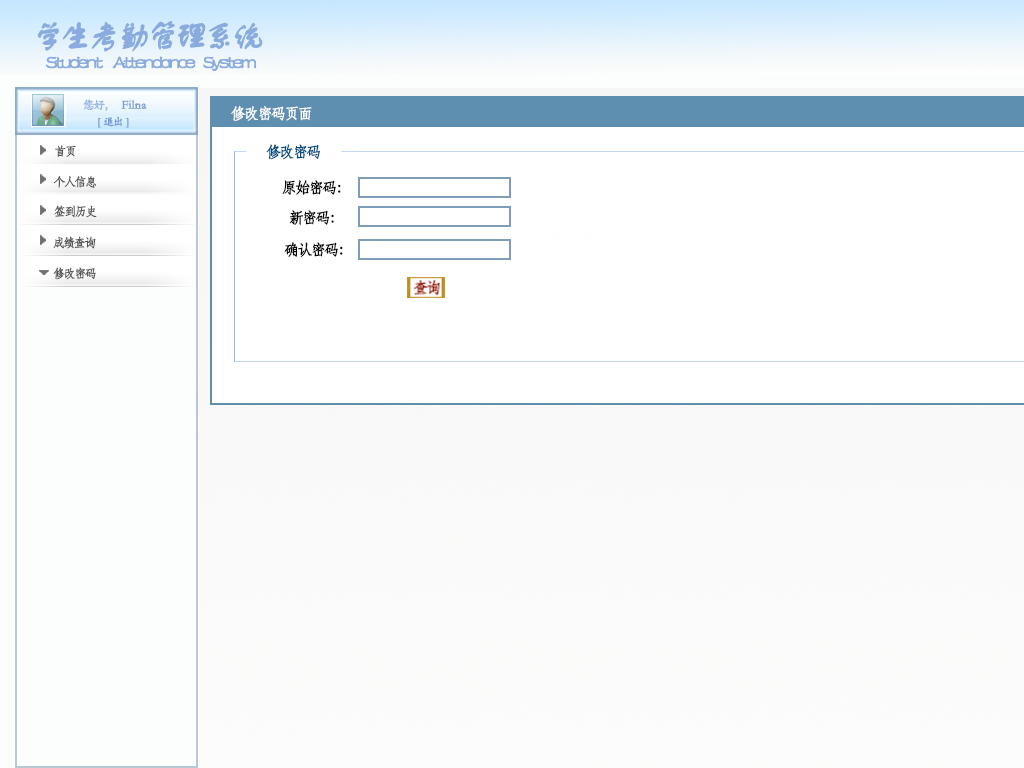
<style>
.page{position:relative;width:1024px;height:768px;background:#ffffff}
.page>*{position:absolute;margin:0}
.t1{font:32.7px "FZSTK--GBK1-0";letter-spacing:-0.15em;color:#89abde;font-weight:bold}
.t2{font:19.6px "FZSTK--GBK1-0";letter-spacing:-0.15em;color:#89abde;font-weight:bold}
.t3{font:12px "STKaiti";letter-spacing:-0.15em;color:#99b7e5;font-weight:bold}
.t4{font:12px "STKaiti";color:#789cd3;font-weight:bold}
.t5{font:15.3px "STFangsong";letter-spacing:-0.15em;color:#fdfefe;font-weight:bold}
.t6{font:10.9px "STKaiti";letter-spacing:-0.15em;color:#789cd3;font-weight:bold}
.t7{font:12px "STFangsong";letter-spacing:-0.15em;color:#555555;font-weight:bold}
.t8{font:15.3px "STFangsong";letter-spacing:-0.15em;color:#014e82;font-weight:bold}
.t9{font:15.3px "STFangsong";letter-spacing:-0.15em;color:#030303;font-weight:bold}
</style>
<div class="page">
<p class="t1" style="left:37px;top:21px;width:226px;height:31px">学生考勤管理系统</p>
<p class="t2" style="left:46px;top:56px;width:211px;height:16px">Student     Attendance    System</p>
<p class="t3" style="left:83px;top:99px;width:25px;height:12px">您好，</p>
<p class="t4" style="left:121px;top:100px;width:26px;height:9px">Filna</p>
<p class="t5" style="left:231px;top:105px;width:81px;height:16px">修改密码页面</p>
<p class="t6" style="left:98px;top:116px;width:31px;height:12px">[   退出   ]</p>
<p class="t7" style="left:55px;top:145px;width:21px;height:12px">首页</p>
<p class="t8" style="left:266px;top:144px;width:54px;height:16px">修改密码</p>
<p class="t7" style="left:53px;top:175px;width:43px;height:13px">个人信息</p>
<p class="t9" style="left:282px;top:180px;width:59px;height:15px">原始密码：</p>
<p class="t7" style="left:54px;top:205px;width:43px;height:13px">签到历史</p>
<p class="t9" style="left:289px;top:210px;width:45px;height:15px">新密码：</p>
<p class="t7" style="left:53px;top:236px;width:43px;height:13px">成绩查询</p>
<p class="t9" style="left:284px;top:242px;width:59px;height:15px">确认密码：</p>
<p class="t7" style="left:53px;top:267px;width:43px;height:13px">修改密码</p>
</div>
